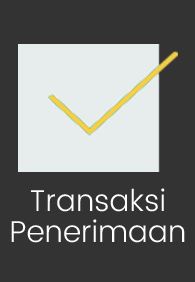
<style>
.page{position:relative;width:195px;height:282px;background:#333333}
.page>*{position:absolute;margin:0}
.t1{font:30px "Poppins-Light";color:#ffffff}
</style>
<div class="page">
<p class="t1" style="left:31px;top:188px;width:134px;height:24px">Transaksi</p>
<p class="t1" style="left:11px;top:219px;width:174px;height:24px">Penerimaan</p>
</div>
